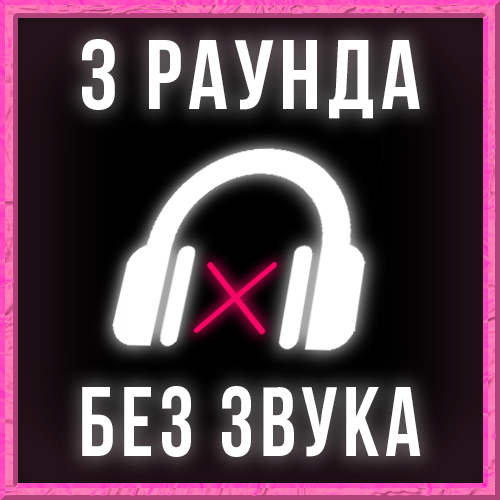
<style>
.page{position:relative;width:500px;height:500px}
.page>*{position:absolute;margin:0}
.t1{font:98px "BebasNeueBold";letter-spacing:0.06em;color:#ffffff}
.t2{font:98px "BebasNeueBold";letter-spacing:0.06em;color:#ffffff;scale:0.91 1}
</style>
<div class="page">
<p class="t1" style="left:82px;top:39px;width:338px;height:80px">3 раунда</p>
<p class="t2" style="left:82px;top:386px;width:339px;height:71px">без звука</p>
</div>
